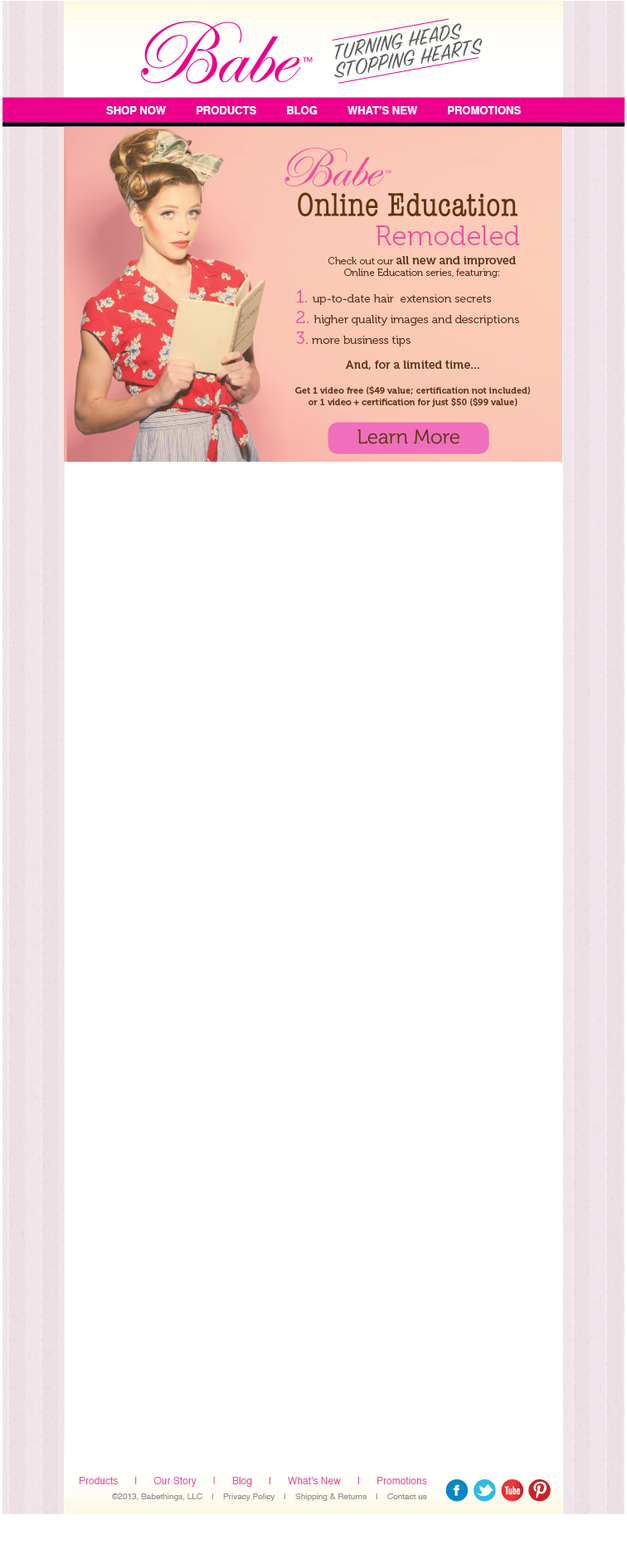
<style>
.page{position:relative;width:627px;height:1568px;background:#ffffff}
.page>*{position:absolute;margin:0}
.t1{font:24px "SignPainterHouseScript";color:#5f6062}
.t2{font:10.8px "Helvetica-Bold";color:#ffffff}
.t3{font:27.8px "Museo-300";color:#eb539e}
.t4{font:9.9px "Museo-300";color:#5f3515}
.t5{font:11.6px "Museo-700";color:#5f3515}
.t6{font:11.6px "Museo-300";color:#5f3515}
.t7{font:17.4px "Museo-300";color:#eb539e}
.t8{font:9.1px "Museo-700";color:#5f3515}
.t9{font:9.9px "Helvetica";color:#e9559e}
.t10{font:8.3px "Helvetica";color:#919396}
</style>
<div class="page">
<p class="t1" style="left:334px;top:23px;width:128px;height:37px">TURNING HEADS</p>
<p class="t1" style="left:333px;top:38px;width:149px;height:40px">STOPPING HEARTS</p>
<p class="t2" style="left:106px;top:106px;width:414px;height:8px">SHOP NOW          PRODUCTS          BLOG          WHAT’S NEW          PROMOTIONS</p>
<p class="t3" style="left:375px;top:225px;width:145px;height:20px">Remodeled</p>
<p class="t4" style="left:327px;top:256px;width:188px;height:22px;text-align:center">Check out our <span class="t5">all new and improved</span> <br>Online Education series, featuring:</p>
<p class="t6" style="left:296px;top:290px;width:223px;height:56px"><span class="t7">1. </span>up-to-date hair  extension secrets<br><span class="t7">2. </span>higher quality images and descriptions<br><span class="t7">3.</span> more business tips</p>
<p class="t8" style="left:295px;top:361px;width:235px;height:46px;text-align:center"><span class="t5">And, for a limited time...<br><br></span>Get 1 video free ($49 value; certification not included)<br>or 1 video + certification for just $50 ($99 value)</p>
<p class="t9" style="left:79px;top:1477px;width:348px;height:10px">Products      |      Our Story      |      Blog      |      What’s New      |      Promotions</p>
<p class="t10" style="left:112px;top:1493px;width:315px;height:8px">©2013, Babethings, LLC    |    Privacy Policy    |    Shipping &amp; Returns    |    Contact us</p>
</div>
